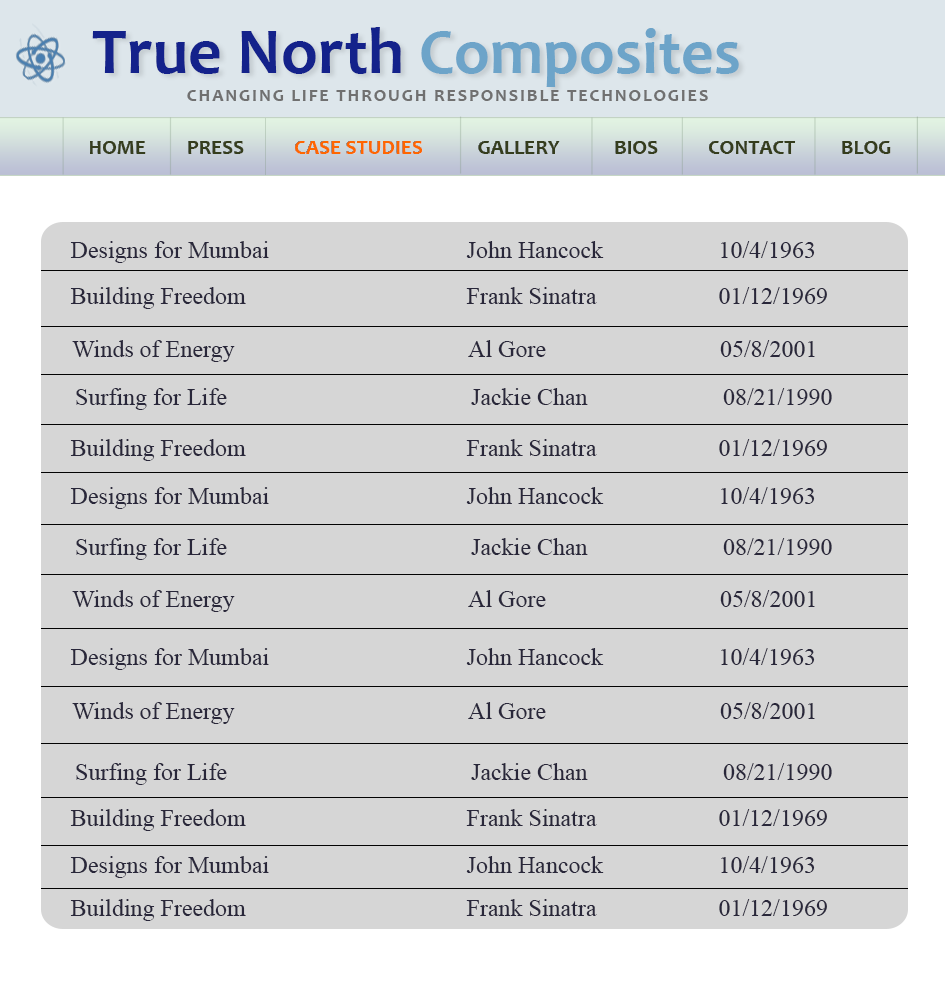
<style>
.page{position:relative;width:945px;height:1000px;background:#d6d6d6}
.page>*{position:absolute;margin:0}
.t1{font:66.4px "Candara-Bold";color:#14228b}
.t2{font:64.2px "Candara-Bold";color:#6da4c9}
.t3{font:18px "Candara-Bold";letter-spacing:0.1em;color:#707070;text-transform:uppercase}
.t4{font:21px "Candara-Bold";color:#353d1d;text-transform:uppercase}
.t5{font:21px "Candara-Bold";color:#ff6600;text-transform:uppercase}
.t6{font:24px "TimesNewRomanPSMT";color:#29273a}
</style>
<div class="page">
<p class="t1" style="left:92px;top:27px;width:647px;height:60px">True North <span class="t2">Composites</span></p>
<p class="t3" style="left:187px;top:90px;width:521px;height:11px">Changing life through responsible technologies</p>
<p class="t4" style="left:90px;top:141px;width:801px;height:13px">Home         Press          <span class="t5"> Case Studies</span>            Gallery            Bios           Contact          Blog</p>
<p class="t6" style="left:70px;top:241px;width:745px;height:22px">Designs for Mumbai      John Hancock    10/4/1963</p>
<p class="t6" style="left:70px;top:287px;width:757px;height:22px">Building Freedom       Frank Sinatra    01/12/1969</p>
<p class="t6" style="left:72px;top:340px;width:743px;height:22px">Winds of Energy       Al Gore     05/8/2001</p>
<p class="t6" style="left:76px;top:388px;width:756px;height:22px">Surfing for Life       Jackie Chan    08/21/1990</p>
<p class="t6" style="left:70px;top:439px;width:757px;height:22px">Building Freedom       Frank Sinatra    01/12/1969</p>
<p class="t6" style="left:70px;top:487px;width:745px;height:22px">Designs for Mumbai      John Hancock    10/4/1963</p>
<p class="t6" style="left:76px;top:538px;width:756px;height:22px">Surfing for Life       Jackie Chan    08/21/1990</p>
<p class="t6" style="left:72px;top:590px;width:743px;height:22px">Winds of Energy       Al Gore     05/8/2001</p>
<p class="t6" style="left:70px;top:648px;width:745px;height:22px">Designs for Mumbai      John Hancock    10/4/1963</p>
<p class="t6" style="left:72px;top:702px;width:743px;height:22px">Winds of Energy       Al Gore     05/8/2001</p>
<p class="t6" style="left:76px;top:763px;width:756px;height:22px">Surfing for Life       Jackie Chan    08/21/1990</p>
<p class="t6" style="left:70px;top:809px;width:757px;height:22px">Building Freedom       Frank Sinatra    01/12/1969</p>
<p class="t6" style="left:70px;top:856px;width:745px;height:22px">Designs for Mumbai      John Hancock    10/4/1963</p>
<p class="t6" style="left:70px;top:899px;width:757px;height:22px">Building Freedom       Frank Sinatra    01/12/1969</p>
</div>
